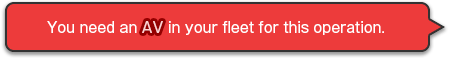
<style>
.page{position:relative;width:450px;height:58px;background:#ed3b3b}
.page>*{position:absolute;margin:0}
.t1{font:14px "GothicMB101Pro-Regular";color:#ffffff}
.t2{font:14px "GothicMB101Pro-Regular";color:#ffd3d3}
</style>
<div class="page">
<p class="t1" style="left:47px;top:21px;width:337px;height:14px">You need an <span class="t2">AV</span> in your fleet for this operation.</p>
<p class="t1" style="left:47px;top:21px;width:337px;height:14px">You need an <span class="t2">AV</span> in your fleet for this operation.</p>
</div>
